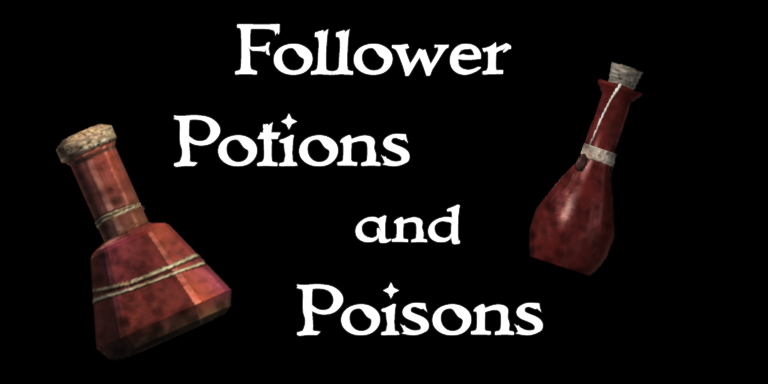
<style>
.page{position:relative;width:768px;height:384px;background:#000000}
.page>*{position:absolute;margin:0}
.t1{font:72px "Immortal";color:#ffffff}
.t2{font:59.6px "Immortal";color:#ffffff}
</style>
<div class="page">
<p class="t1" style="left:235px;top:24px;width:276px;height:52px">Follower</p>
<p class="t1" style="left:173px;top:113px;width:237px;height:54px">Potions</p>
<p class="t2" style="left:355px;top:204px;width:105px;height:41px">and</p>
<p class="t1" style="left:296px;top:282px;width:247px;height:54px">Poisons</p>
</div>
